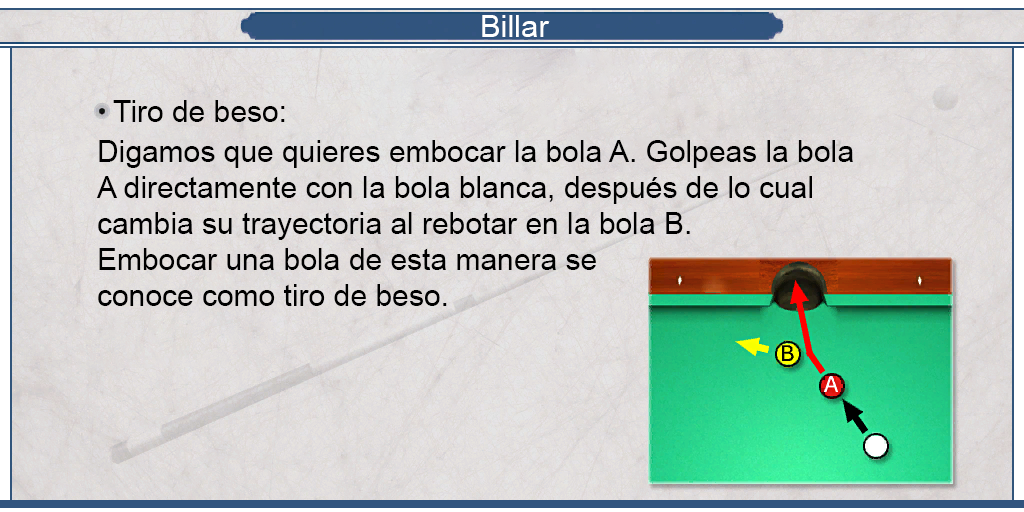
<style>
.page{position:relative;width:1024px;height:512px}
.page>*{position:absolute;margin:0}
.t1{font:30.8px "ArialMT";color:#ffffff}
.t2{font:30px "ArialMT";color:#000000}
</style>
<div class="page">
<p class="t1" style="left:482px;top:15px;width:68px;height:22px">Billar</p>
<p class="t2" style="left:96px;top:100px;width:757px;height:206px;text-align:justify">Tiro de beso:<br><br>Digamos que quieres embocar la bola A. Golpeas la bola<br>A directamente con la bola blanca, después de lo cual<br>cambia su trayectoria al rebotar en la bola B. <br>Embocar una bola de esta manera se <br>conoce como tiro de beso.</p>
</div>
